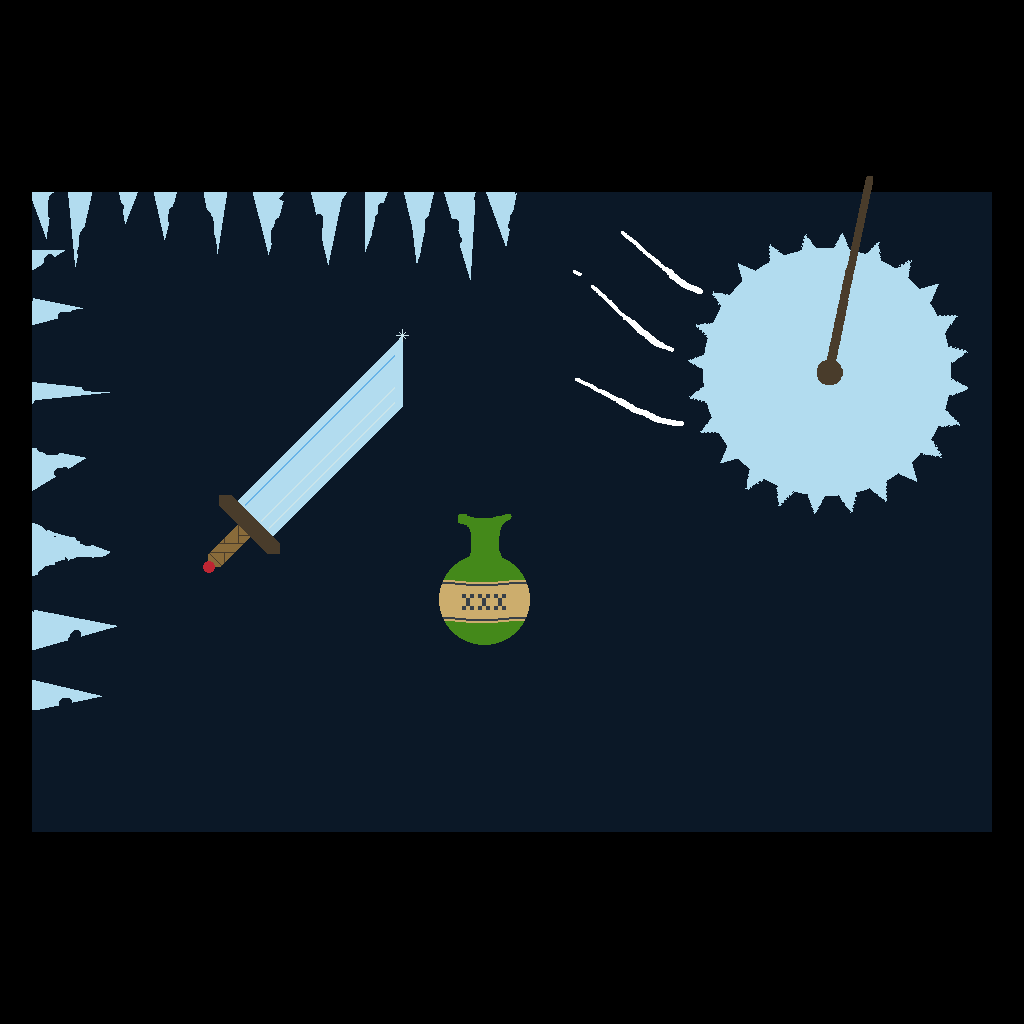
<style>
.page{position:relative;width:1024px;height:1024px;background:#0b1827}
.page>*{position:absolute;margin:0}
.t1{font:32px "04b03";color:#373f47}
</style>
<div class="page">
<p class="t1" style="left:462px;top:594px;width:44px;height:16px">xxx</p>
</div>
